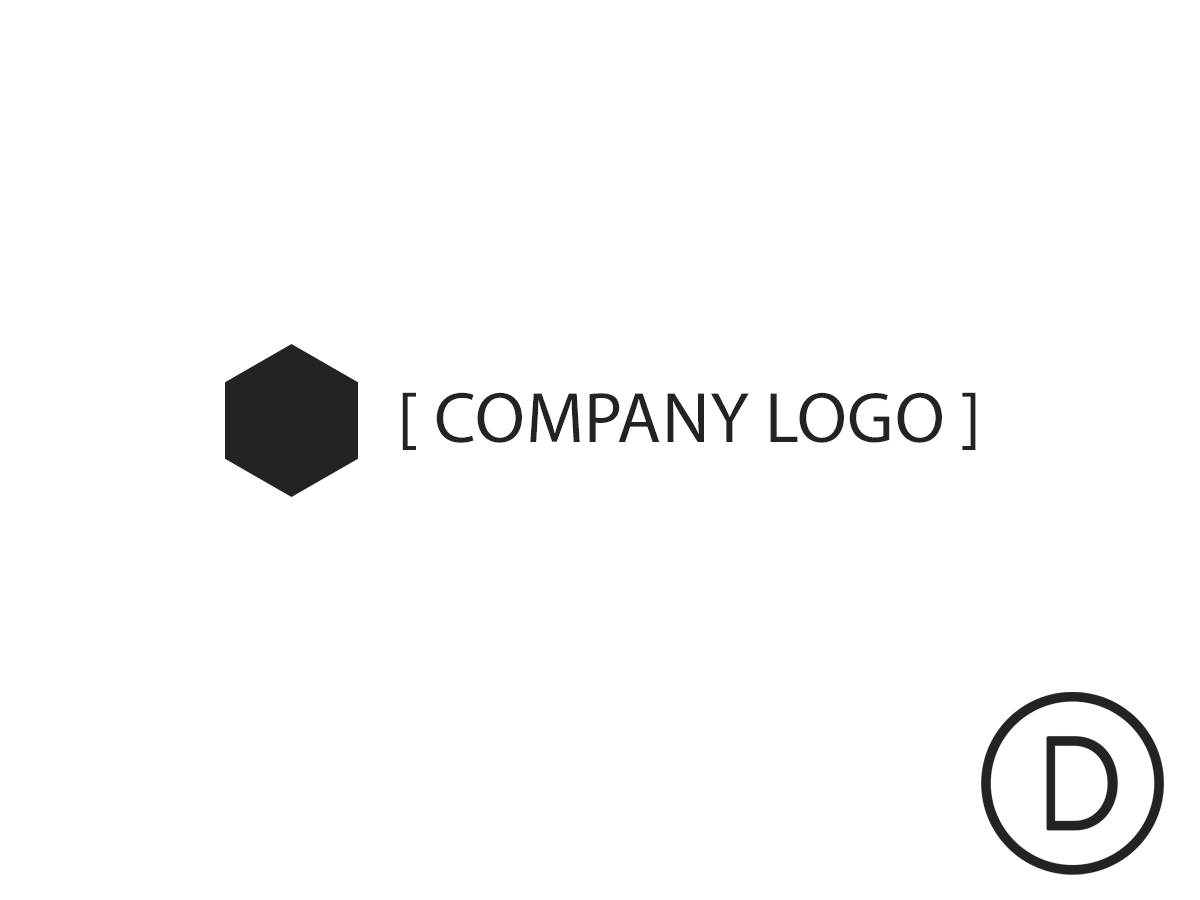
<style>
.page{position:relative;width:1200px;height:900px;background:#ffffff}
.page>*{position:absolute;margin:0}
.t1{font:72px "MyriadPro-Regular";letter-spacing:0.01em;color:#232323}
</style>
<div class="page">
<p class="t1" style="left:402px;top:392px;width:574px;height:58px">[ COMPANY LOGO ]</p>
</div>
